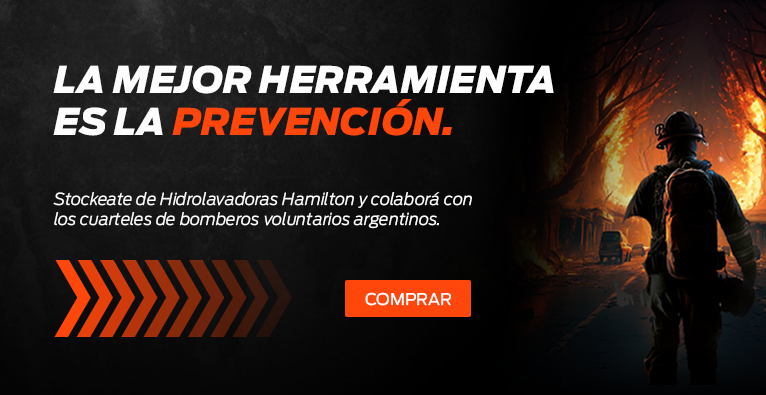
<style>
.page{position:relative;width:766px;height:395px}
.page>*{position:absolute;margin:0}
.t1{font:36.6px/41.9px "Antenna-BlackItalic";color:#fefefe}
.t2{font:36.6px/41.9px "Antenna-BlackItalic";color:#ff470c}
.t3{font:16.5px "Antenna-LightItalic";color:#ffffff}
.t4{font:16.1px "Antenna-Regular";color:#ffffff}
</style>
<div class="page">
<p class="t1" style="left:53px;top:65px;width:501px;height:71px;text-align:justify">LA MEJOR HERRAMIENTA<br>ES LA<span class="t2"> PREVENCIÓN.</span></p>
<p class="t3" style="left:53px;top:192px;width:419px;height:37px;text-align:justify">Stockeate de Hidrolavadoras Hamilton y colaborá con<br>los cuarteles de bomberos voluntarios argentinos.</p>
<p class="t4" style="left:365px;top:292px;width:86px;height:14px">COMPRAR</p>
</div>
